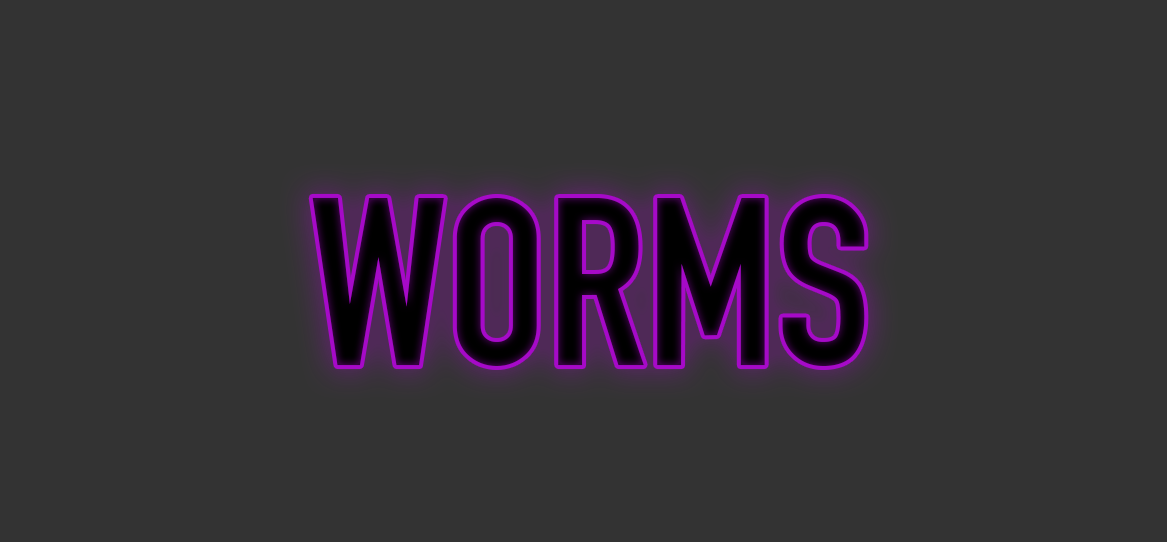
<style>
.page{position:relative;width:1167px;height:542px;background:#333333}
.page>*{position:absolute;margin:0}
.t1{font:233.7px "DINEngschrift";color:#070008}
</style>
<div class="page">
<p class="t1" style="left:312px;top:197px;width:553px;height:169px">WORMS</p>
</div>
